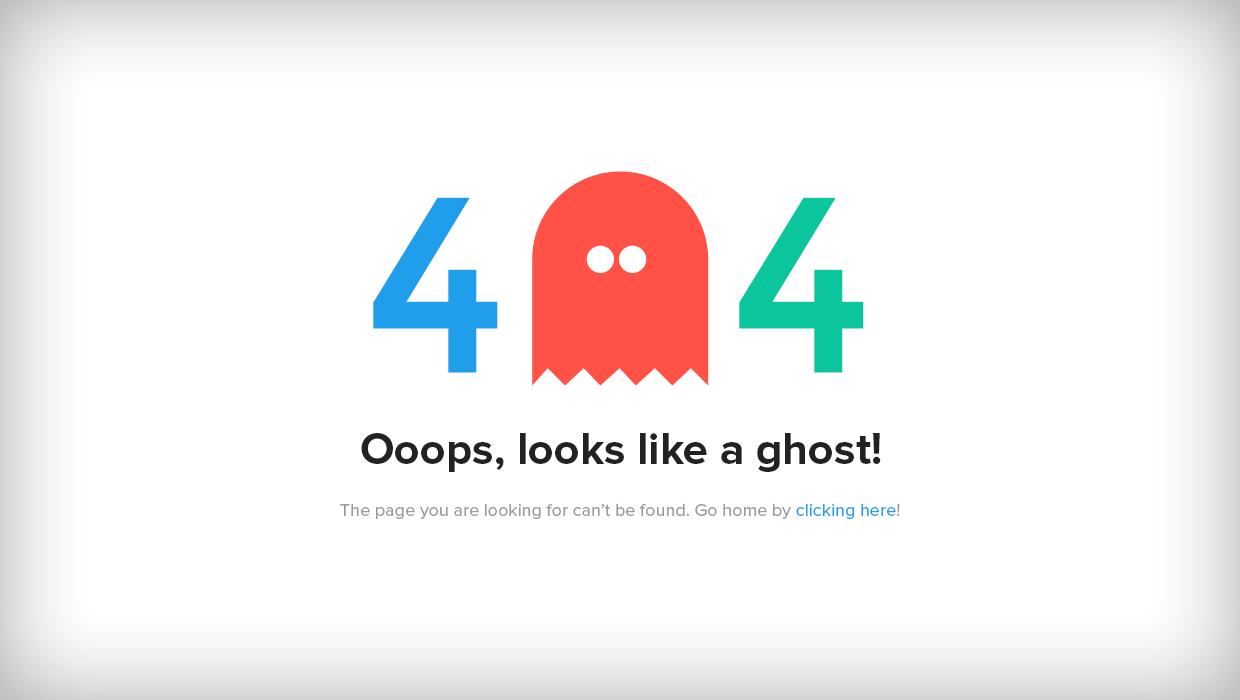
<style>
.page{position:relative;width:1240px;height:700px;background:#ffffff}
.page>*{position:absolute;margin:0}
.t1{font:250px "Montserrat-Regular";color:#1f9eeb}
.t2{font:250px "Montserrat-Regular";color:#0bc59c}
.t3{font:45px "ProximaNova-Bold";color:#222222}
.t4{font:18px "ProximaNova-Regular";color:#999999}
.t5{font:18px "ProximaNova-Regular";color:#1f9eeb}
</style>
<div class="page">
<p class="t1" style="left:373px;top:197px;width:125px;height:176px">4</p>
<p class="t2" style="left:739px;top:197px;width:125px;height:176px">4</p>
<p class="t3" style="left:361px;top:433px;width:520px;height:39px">Ooops, looks like a ghost!</p>
<p class="t4" style="left:340px;top:503px;width:560px;height:16px">The page you are looking for can’t be found. Go home by <span class="t5">clicking here</span>!</p>
</div>
